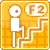
<style>
.page{position:relative;width:50px;height:50px}
.page>*{position:absolute;margin:0}
.t1{font:12px "AmiraParadiso";color:#ed8721}
</style>
<div class="page">
<p class="t1" style="left:29px;top:5px;width:6px;height:9px">F</p>
</div>
